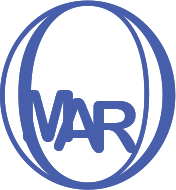
<style>
.page{position:relative;width:176px;height:190px;background:#ffffff}
.page>*{position:absolute;margin:0}
.t1{font:270.2px "AcademyEngravedLetPlain";color:#475fab;scale:0.93 1}
.t2{font:72px "ArialRoundedMTBold";color:#475fab}
</style>
<div class="page">
<p class="t1" style="left:0px;top:0px;width:176px;height:190px">O</p>
<p class="t2" style="left:23px;top:90px;width:50px;height:52px">M</p>
<p class="t2" style="left:53px;top:98px;width:49px;height:53px">A</p>
<p class="t2" style="left:93px;top:101px;width:44px;height:52px">R</p>
</div>
